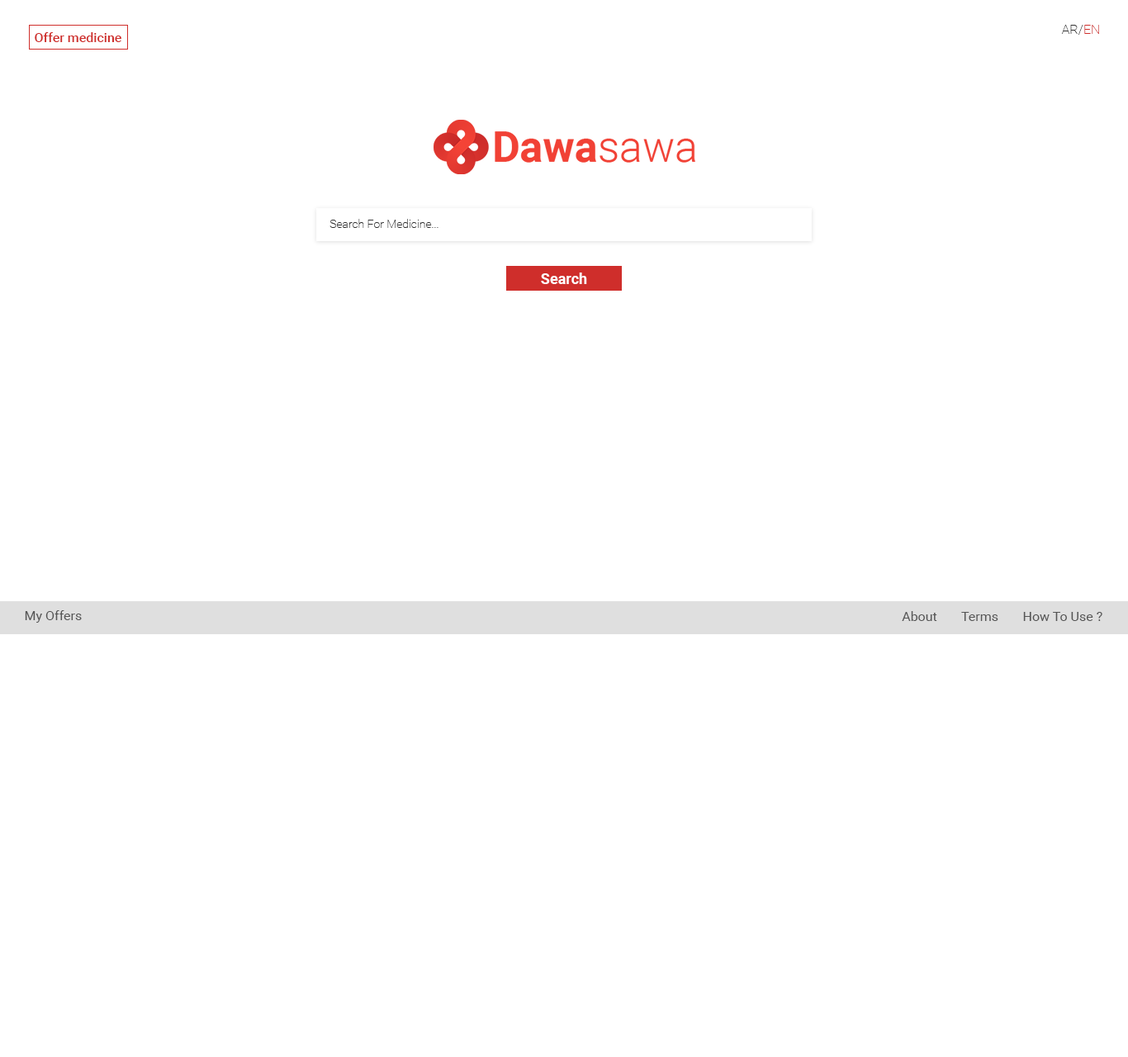
<style>
.page{position:relative;width:1128px;height:1057px;background:#ffffff}
.page>*{position:absolute;margin:0}
.t1{font:13.2px "Roboto-Thin";color:#333333}
.t2{font:13.2px "Roboto-Thin";color:#cf2e2b}
.t3{font:13.2px "Roboto-Medium";color:#cf2e2b}
.t4{font:11.6px "Roboto-Thin";color:#333333}
.t5{font:14.9px "Roboto-Bold";color:#ffffff}
.t6{font:13.2px "Roboto-Regular";color:#555555}
</style>
<div class="page">
<p class="t1" style="left:1061px;top:25px;width:38px;height:10px">AR/<span class="t2">EN</span></p>
<p class="t3" style="left:35px;top:32px;width:86px;height:10px">Offer medicine</p>
<p class="t4" style="left:330px;top:219px;width:109px;height:9px">Search For Medicine...</p>
<p class="t5" style="left:541px;top:273px;width:46px;height:11px">Search</p>
<p class="t6" style="left:25px;top:610px;width:57px;height:13px">My Offers</p>
<p class="t6" style="left:902px;top:611px;width:35px;height:10px">About</p>
<p class="t6" style="left:961px;top:612px;width:37px;height:9px">Terms</p>
<p class="t6" style="left:1023px;top:612px;width:79px;height:9px">How To Use ?</p>
</div>
